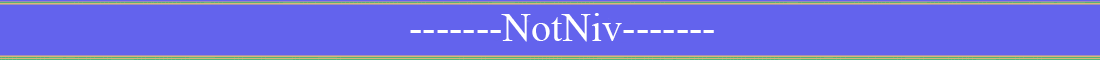
<style>
.page{position:relative;width:1100px;height:60px;background:#6363ed}
.page>*{position:absolute;margin:0}
.t1{font:40px "TimesNewRomanPSMT";color:#ffffff}
</style>
<div class="page">
<p class="t1" style="left:410px;top:13px;width:304px;height:29px">-------NotNiv-------</p>
</div>
